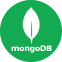
<style>
.page{position:relative;width:62px;height:62px;background:#14aa51}
.page>*{position:absolute;margin:0}
.t1{font:8px "Alexandria-Bold";color:#ffffff}
.t2{font:8px "Alexandria-Bold";color:#14aa51}
</style>
<div class="page">
<p class="t1" style="left:11px;top:45px;width:41px;height:8px"><span class="t2">m</span>ongoDB</p>
</div>
